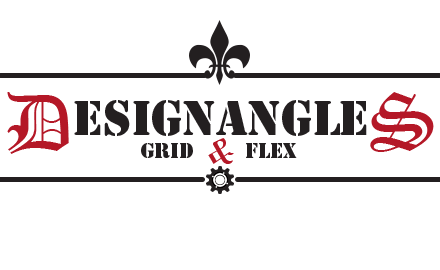
<style>
.page{position:relative;width:440px;height:270px;background:#ffffff}
.page>*{position:absolute;margin:0}
.t1{font:80px "OldEnglishTextMT";color:#b41827}
.t2{font:45px "StencilStd";color:#231f20}
.t3{font:20px "StencilStd";color:#231f20}
.t4{font:35px "OldEnglishTextMT";color:#b41827}
</style>
<div class="page">
<p class="t1" style="left:7px;top:92px;width:62px;height:62px">D</p>
<p class="t2" style="left:74px;top:100px;width:293px;height:36px">esignangle</p>
<p class="t1" style="left:370px;top:92px;width:64px;height:60px">S</p>
<p class="t3" style="left:141px;top:143px;width:52px;height:15px">Grid</p>
<p class="t4" style="left:208px;top:138px;width:26px;height:26px">&amp;</p>
<p class="t3" style="left:246px;top:143px;width:51px;height:15px">flEX</p>
</div>
